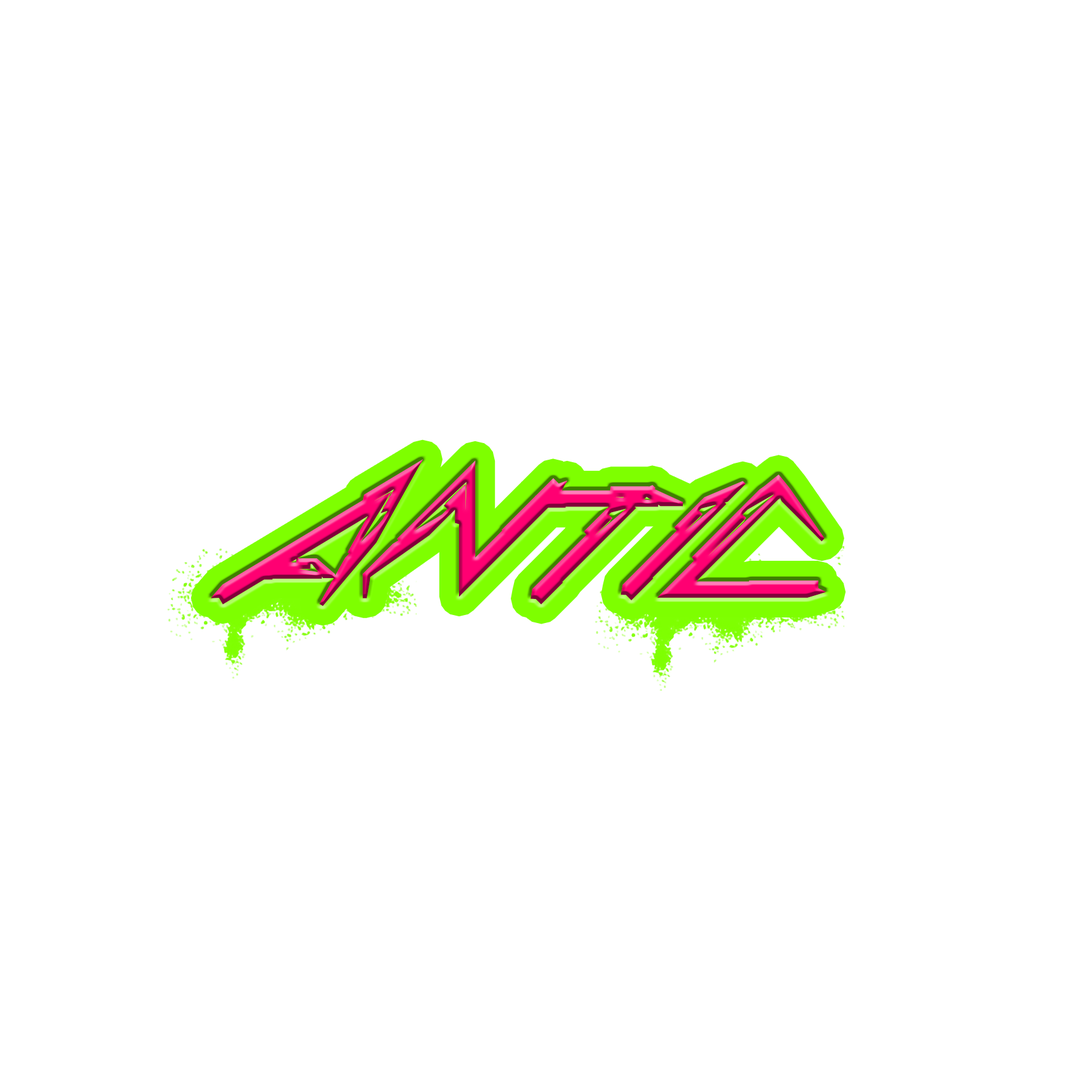
<style>
.page{position:relative;width:1092px;height:1092px;background:#ffffff}
.page>*{position:absolute;margin:0}
.t1{font:252.7px "CynatarRegular"}
</style>
<div class="page">
<p class="t1" style="left:210px;top:459px;width:616px;height:147px">ANTIC</p>
</div>
